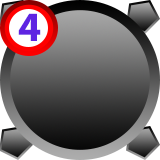
<style>
.page{position:relative;width:160px;height:160px}
.page>*{position:absolute;margin:0}
.t1{font:41.7px "MyriadPro-Bold";color:#5e24e2}
</style>
<div class="page">
<p class="t1" style="left:18px;top:13px;width:23px;height:28px">4</p>
</div>
